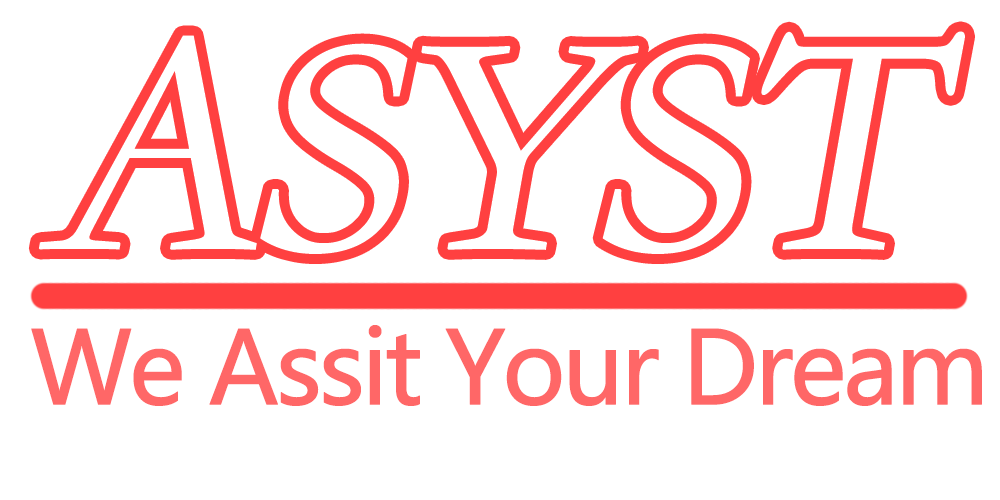
<style>
.page{position:relative;width:1000px;height:500px;background:#ffffff}
.page>*{position:absolute;margin:0}
.t1{font:100px "MicrosoftYaHei";letter-spacing:-0.06em;color:#ff6767;font-weight:bold}
</style>
<div class="page">
<p class="t1" style="left:31px;top:325px;width:951px;height:81px">We Assit Your Dream</p>
</div>
